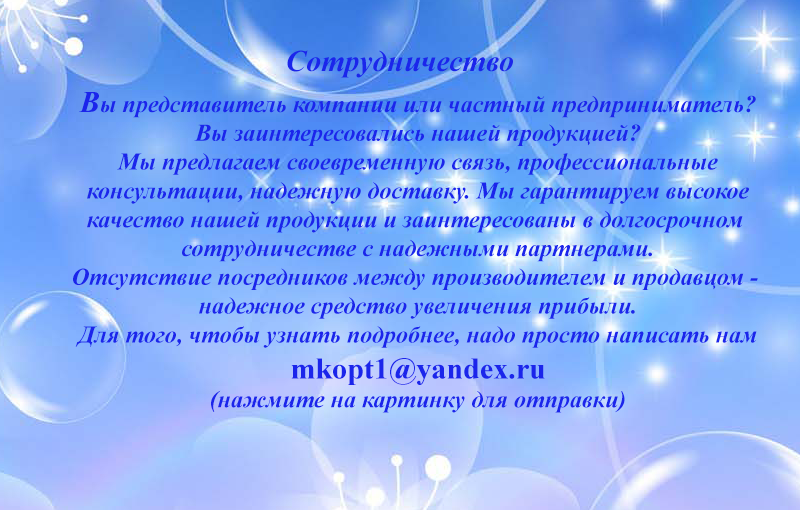
<style>
.page{position:relative;width:800px;height:510px}
.page>*{position:absolute;margin:0}
.t1{font:30px "TimesNewRomanPS-BoldItalicMT";color:#1b25eb}
.t2{font:24px "TimesNewRomanPS-BoldItalicMT";color:#1b25eb}
.t3{font:30px "TimesNewRomanPS-BoldMT";color:#1b25eb}
</style>
<div class="page">
<p class="t1" style="left:287px;top:50px;width:226px;height:28px">Сотрудничество</p>
<p class="t2" style="left:73px;top:92px;width:685px;height:321px;text-align:center"><span class="t1">В</span>ы представитель компании или частный предприниматель?<br>Вы заинтересовались нашей продукцией?<br>Мы предлагаем своевременную связь, профессиональные<br>консультации, надежную доставку. Мы гарантируем высокое<br>качество нашей продукции и заинтересованы в долгосрочном <br>сотрудничестве с надежными партнерами.<br>Отсутствие посредников между производителем и продавцом - <br>надежное средство увеличения прибыли.<br>Для того, чтобы узнать подробнее, надо просто написать нам<br><span class="t3">mkopt1@yandex.ru<br></span>(нажмите на картинку для отправки)</p>
</div>
